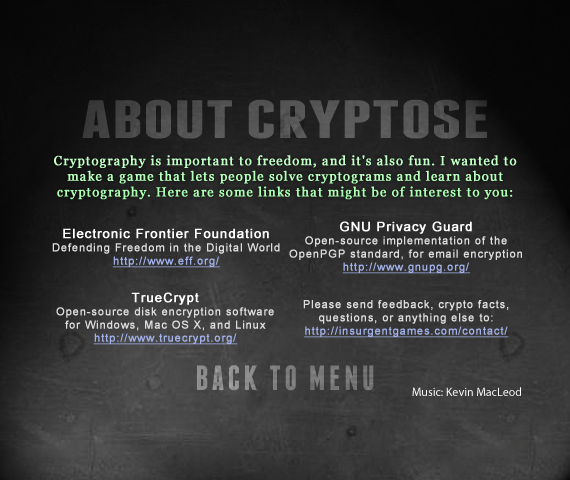
<style>
.page{position:relative;width:570px;height:480px}
.page>*{position:absolute;margin:0}
.t1{font:54px "Franchise-Bold";color:#515151;scale:1.6 1}
.t2{font:13px "Georgia";letter-spacing:0.06em;color:#b5ffbb;font-weight:bold}
.t3{font:11px "ArialMT";letter-spacing:0.06em;color:#dedede;font-weight:bold}
.t4{font:13px "ArialMT";letter-spacing:0.06em;color:#ffffff;font-weight:bold}
.t5{font:11px "ArialMT";letter-spacing:0.06em;color:#a2b1ea;font-weight:bold;text-decoration:underline}
.t6{font:35px "Franchise-Bold";letter-spacing:0.1em;color:#80807e;text-transform:uppercase}
.t7{font:12px "MyriadPro-Regular";color:#ffffff}
</style>
<div class="page">
<p class="t1" style="left:82px;top:99px;width:405px;height:40px">ABOUT CRYPTOSE</p>
<p class="t2" style="left:54px;top:155px;width:463px;height:45px;text-align:center">Cryptography is important to freedom, and it's also fun. I wanted to<br>make a game that lets people solve cryptograms and learn about <br>cryptography. Here are some links that might be of interest to you:</p>
<p class="t3" style="left:289px;top:221px;width:233px;height:53px;text-align:center"><span class="t4">GNU Privacy Guard<br></span>Open-source implementation of the<br>OpenPGP standard, for email encryption<br><span class="t5">http://www.gnupg.org/</span></p>
<p class="t3" style="left:52px;top:228px;width:228px;height:40px;text-align:center"><span class="t4">Electronic Frontier Foundation<br></span>Defending Freedom in the Digital World<br><span class="t5">http://www.eff.org/</span></p>
<p class="t3" style="left:56px;top:292px;width:218px;height:53px;text-align:center"><span class="t4">TrueCrypt<br></span>Open-source disk encryption software<br>for Windows, Mac OS X, and Linux<br><span class="t5">http://www.truecrypt.org/</span></p>
<p class="t3" style="left:303px;top:300px;width:206px;height:38px;text-align:center">Please send feedback, crypto facts,<br>questions, or anything else to:<br><span class="t5">http://insurgentgames.com/contact/</span></p>
<p class="t6" style="left:197px;top:365px;width:177px;height:26px">BACK TO MENU</p>
<p class="t7" style="left:412px;top:387px;width:109px;height:9px">Music: Kevin MacLeod</p>
</div>
